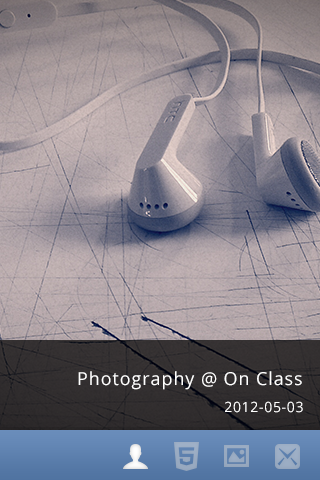
<style>
.page{position:relative;width:320px;height:480px}
.page>*{position:absolute;margin:0}
.t1{font:18px "OpenSans";letter-spacing:0.05em;color:#ffffff}
.t2{font:14px "OpenSans";letter-spacing:0.05em;color:#ffffff}
</style>
<div class="page">
<p class="t1" style="left:78px;top:371px;width:224px;height:19px">Photography @ On Class</p>
<p class="t2" style="left:225px;top:401px;width:78px;height:12px">2012-05-03</p>
</div>
